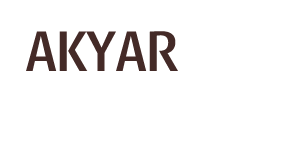
<style>
.page{position:relative;width:300px;height:150px;background:#ffffff}
.page>*{position:absolute;margin:0}
.t1{font:60px "Sansita-Regular";color:#442a27}
</style>
<div class="page">
<p class="t1" style="left:26px;top:31px;width:152px;height:40px">AKYAR</p>
</div>
